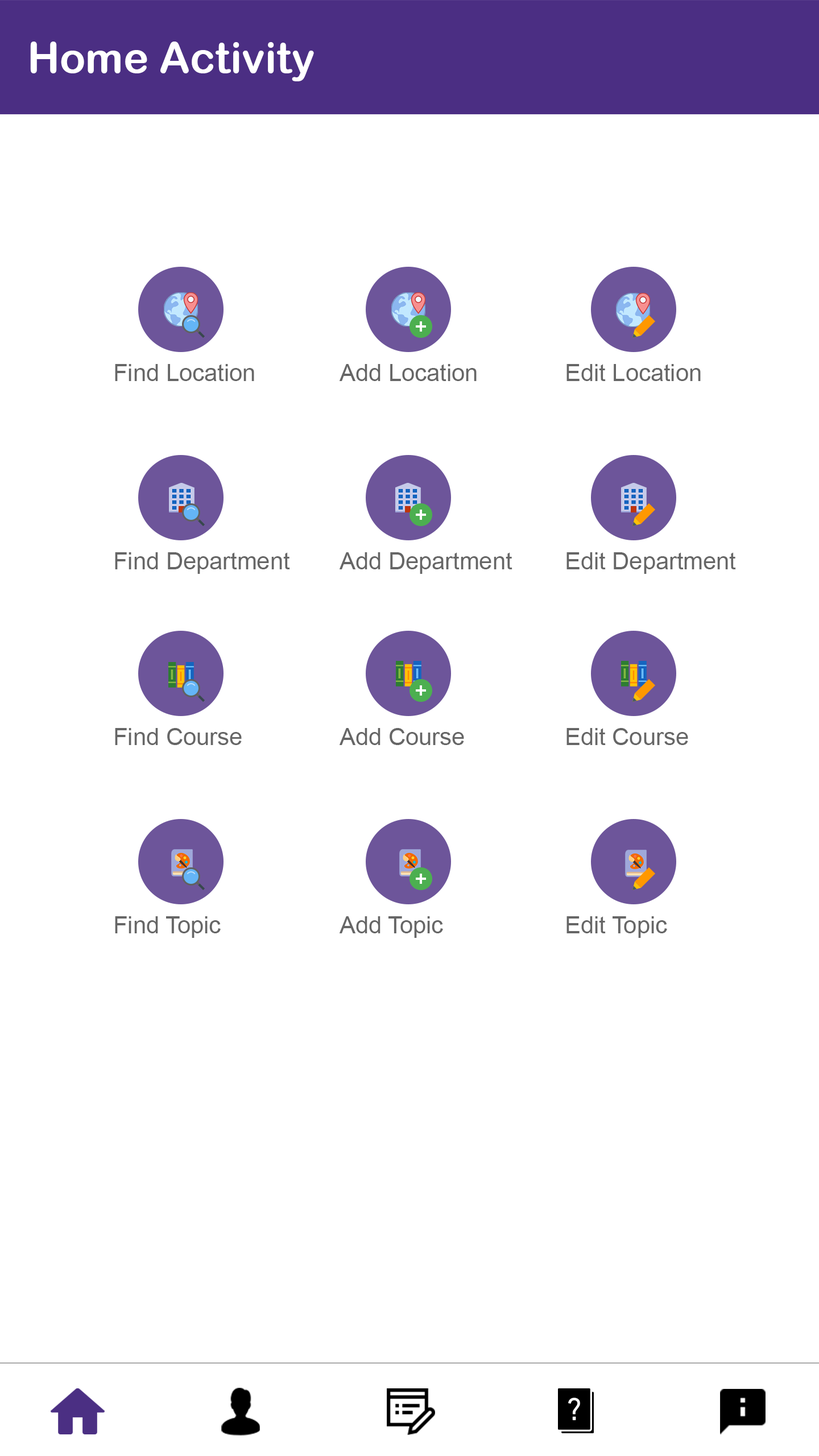
<style>
.page{position:relative;width:819px;height:1456px;background:#ffffff}
.page>*{position:absolute;margin:0}
.t1{font:42.7px "ArialRoundedMTBold";color:#ffffff}
.t2{font:23.7px "ArialMT";color:#666666}
</style>
<div class="page">
<p class="t1" style="left:30px;top:42px;width:284px;height:39px">Home Activity</p>
<p class="t2" style="left:115px;top:364px;width:139px;height:17px">Find Location</p>
<p class="t2" style="left:339px;top:364px;width:138px;height:17px">Add Location</p>
<p class="t2" style="left:566px;top:364px;width:135px;height:17px">Edit Location</p>
<p class="t2" style="left:115px;top:552px;width:175px;height:22px">Find Department</p>
<p class="t2" style="left:339px;top:552px;width:173px;height:22px">Add Department</p>
<p class="t2" style="left:566px;top:552px;width:170px;height:22px">Edit Department</p>
<p class="t2" style="left:115px;top:728px;width:127px;height:17px">Find Course</p>
<p class="t2" style="left:339px;top:728px;width:125px;height:17px">Add Course</p>
<p class="t2" style="left:566px;top:728px;width:122px;height:17px">Edit Course</p>
<p class="t2" style="left:115px;top:916px;width:106px;height:22px">Find Topic</p>
<p class="t2" style="left:339px;top:916px;width:104px;height:22px">Add Topic</p>
<p class="t2" style="left:566px;top:916px;width:101px;height:22px">Edit Topic</p>
</div>
